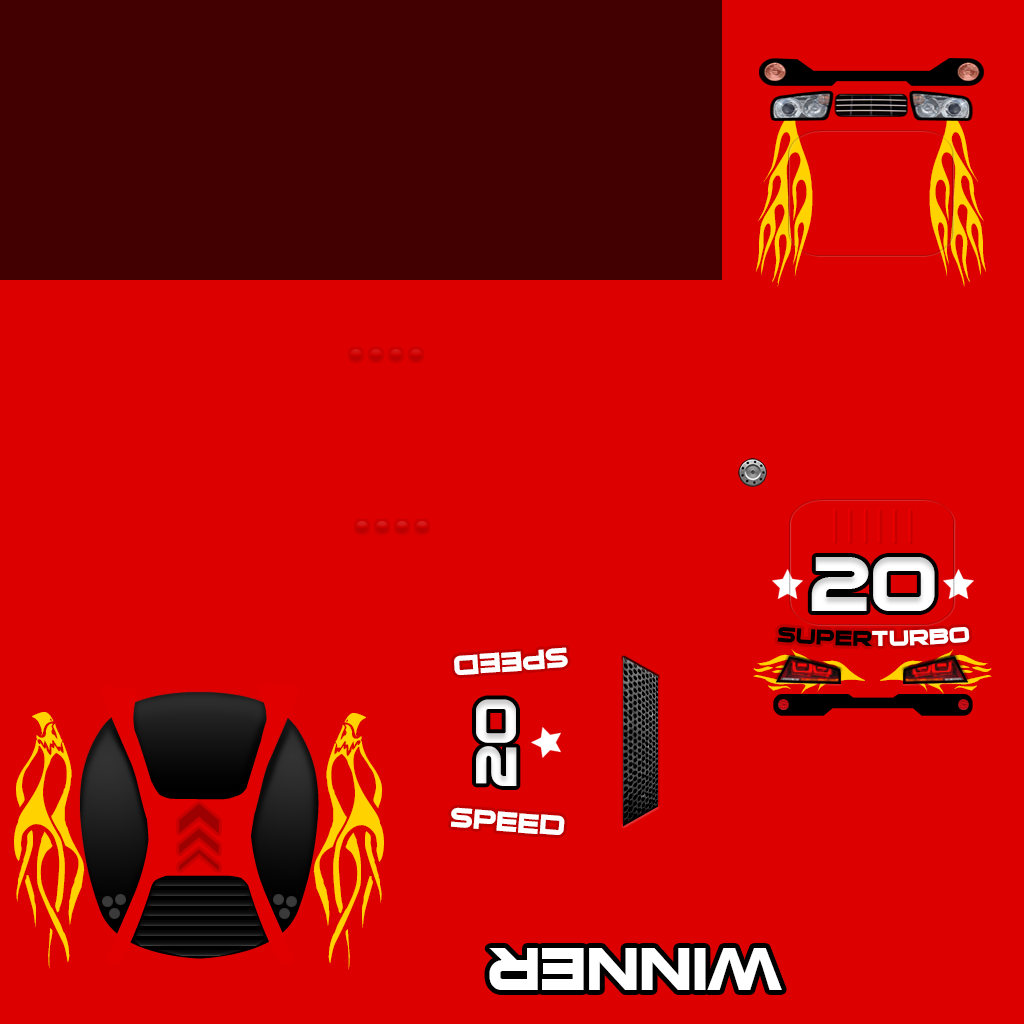
<style>
.page{position:relative;width:1024px;height:1024px;background:#dd0000}
.page>*{position:absolute;margin:0}
.t1{font:89.2px "VehicleDecals'Flames&Art'";color:#ffd200;font-variant:small-caps;scale:0.86 1}
.t2{font:70.1px "SuiGenerisBold";color:#ffffff;font-variant:small-caps}
.t3{font:30px "SuiGenerisBold";color:#000000;font-variant:small-caps}
.t4{font:30px "SuiGenerisBold";color:#ffffff;font-variant:small-caps}
.t5{font:36.8px "SuiGenerisBold";color:#ffffff;font-variant:small-caps}
.t6{font:72px "VehicleDecals'Flames&Art'";font-variant:small-caps;scale:0.49 1}
.t7{font:53.2px "SuiGenerisBold";color:#ffffff;font-variant:small-caps;scale:0.93 1}
.t8{font:79.7px "VehicleDecals'Flames&Art'";color:#ffd200;font-variant:small-caps;scale:0.8 1}
.t9{font:78.7px "SuiGenerisBold";color:#ffffff;font-variant:small-caps}
</style>
<div class="page">
<p class="t1" style="left:756px;top:101px;width:57px;height:186px;rotate:90deg">c</p>
<p class="t1" style="left:929px;top:101px;width:57px;height:186px;rotate:90deg">c</p>
<p class="t2" style="left:811px;top:557px;width:124px;height:54px">20</p>
<p class="t3" style="left:777px;top:627px;width:193px;height:19px">super<span class="t4">turbo</span></p>
<p class="t5" style="left:454px;top:647px;width:114px;height:28px;rotate:176deg">speed</p>
<p class="t6" style="left:753px;top:649px;width:112px;height:45px;rotate:180deg">s</p>
<p class="t6" style="left:880px;top:649px;width:112px;height:45px">s</p>
<p class="t7" style="left:476px;top:699px;width:41px;height:87px;rotate:-90deg">20</p>
<p class="t8" style="left:14px;top:712px;width:71px;height:257px;rotate:90deg">4</p>
<p class="t8" style="left:313px;top:713px;width:71px;height:257px;rotate:90deg">4</p>
<p class="t5" style="left:451px;top:807px;width:114px;height:28px;rotate:5deg">speed</p>
<p class="t9" style="left:489px;top:948px;width:293px;height:42px;rotate:180deg">winner</p>
</div>
